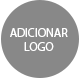
<style>
.page{position:relative;width:80px;height:78px;background:#888888}
.page>*{position:absolute;margin:0}
.t1{font:12px "MyriadPro-Regular";color:#ffffff}
</style>
<div class="page">
<p class="t1" style="left:10px;top:28px;width:58px;height:23px;text-align:center">ADICIONAR<br>LOGO</p>
</div>
